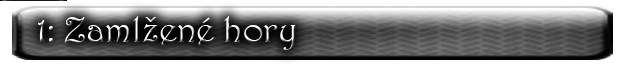
<style>
.page{position:relative;width:622px;height:67px}
.page>*{position:absolute;margin:0}
.t1{font:36px "Harrington"}
</style>
<div class="page">
<p class="t1" style="left:37px;top:16px;width:259px;height:34px">1: Zamlžené hory</p>
</div>
